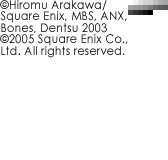
<style>
.page{position:relative;width:168px;height:160px;background:#ffffff}
.page>*{position:absolute;margin:0}
.t1{font:12px/12px "CenturyGothic";letter-spacing:0.025em;color:#000000;scale:0.92 1}
.t2{font:12px/11px "CenturyGothic";letter-spacing:0.025em;color:#000000;scale:0.92 1}
</style>
<div class="page">
<p class="t1" style="left:0px;top:0px;width:128px;height:58px">©Hiromu Arakawa/<br><span class="t2">Square Enix, MBS, ANX,<br></span>Bones, Dentsu 2003<br><span class="t2">©2005 Square Enix Co.,<br></span>Ltd. All rights reserved.</p>
</div>
